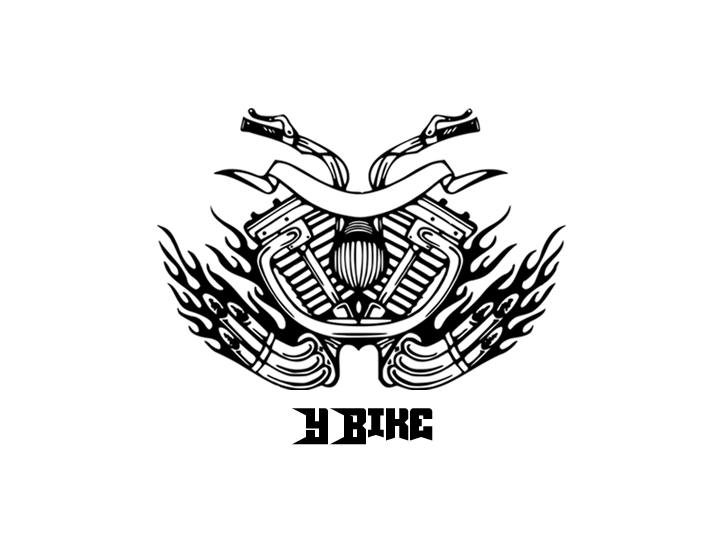
<style>
.page{position:relative;width:725px;height:550px;background:#ffffff}
.page>*{position:absolute;margin:0}
.t1{font:72px "Robus";color:#000000}
</style>
<div class="page">
<p class="t1" style="left:292px;top:408px;width:141px;height:37px">YBike</p>
</div>
